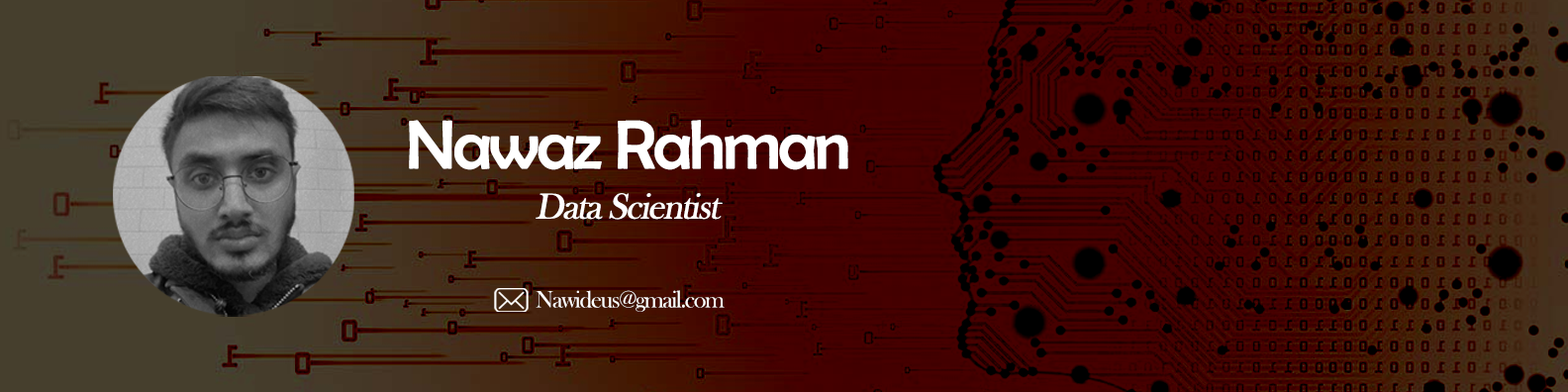
<style>
.page{position:relative;width:1568px;height:392px}
.page>*{position:absolute;margin:0}
.t1{font:69px "BerlinSansFB-Reg";letter-spacing:-0.06em;color:#ffffff;font-weight:bold}
.t2{font:36.8px "BaskOldFace";letter-spacing:-0.06em;color:#ffffff;font-weight:bold;font-style:italic}
.t3{font:24.6px "BaskOldFace";letter-spacing:-0.06em;color:#ffffff}
</style>
<div class="page">
<p class="t1" style="left:409px;top:120px;width:439px;height:50px">Nawaz Rahman</p>
<p class="t2" style="left:536px;top:193px;width:187px;height:27px">Data Scientist</p>
<p class="t3" style="left:536px;top:290px;width:189px;height:22px">Nawideus@gmail.com</p>
</div>
